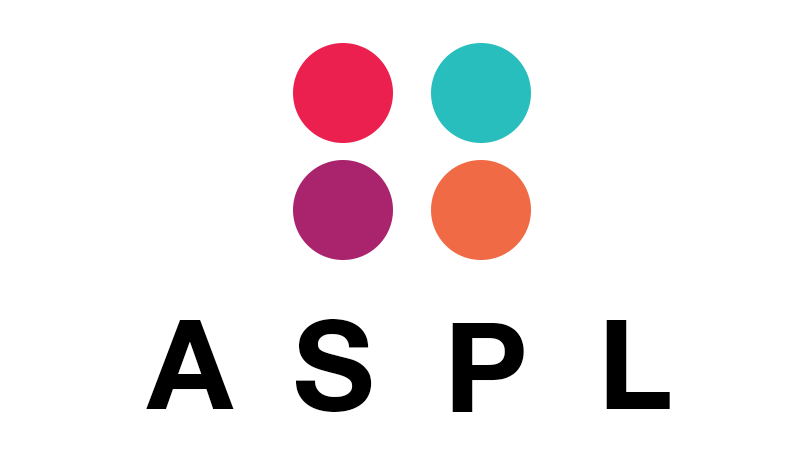
<style>
.page{position:relative;width:809px;height:464px;background:#ffffff}
.page>*{position:absolute;margin:0}
.t1{font:125px "HelveticaNeue-Bold";color:#000000}
</style>
<div class="page">
<p class="t1" style="left:146px;top:320px;width:88px;height:89px">A</p>
<p class="t1" style="left:296px;top:319px;width:76px;height:93px">S</p>
<p class="t1" style="left:452px;top:323px;width:72px;height:89px">P</p>
<p class="t1" style="left:606px;top:320px;width:64px;height:89px">L</p>
</div>
